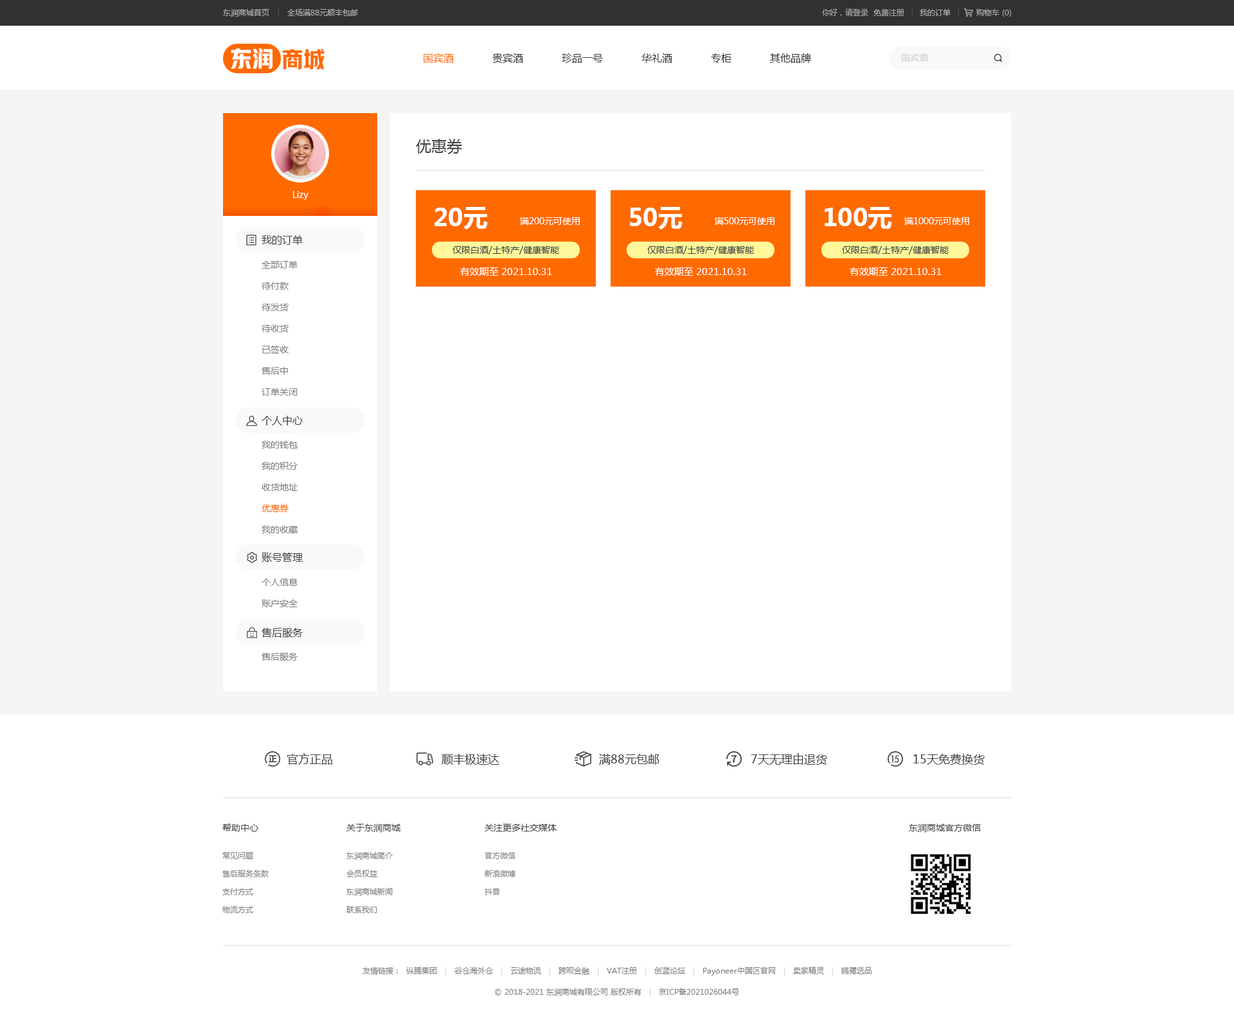
<style>
.page{position:relative;width:1234px;height:1023px;background:#ffffff}
.page>*{position:absolute;margin:0}
.t1{font:7.7px "MicrosoftYaHei";color:#b0b0b0}
.t2{font:7.7px "MicrosoftYaHei";color:#acacac}
.t3{font:21.9px "HYYakuHei-HEW";color:#ffffff}
.t4{font:21.9px "HYYakuHei-HEW";color:#ff6a00}
.t5{font:10.3px "MicrosoftYaHei";color:#333333}
.t6{font:10.3px "MicrosoftYaHei";color:#ff6a00}
.t7{font:9px "MicrosoftYaHei";color:#d2d2d2}
.t8{font:15.4px "MicrosoftYaHei";color:#434343}
.t9{font:9px "MicrosoftYaHei";color:#ffffff}
.t10{font:24.4px "MicrosoftYaHei-Bold";color:#ffffff}
.t11{font:10.3px "MicrosoftYaHei";color:#434343}
.t12{font:9px "MicrosoftYaHei";color:#434343}
.t13{font:9px/21.2px "MicrosoftYaHei";color:#7d7d7d}
.t14{font:9.6px "MicrosoftYaHei";color:#ffffff}
.t15{font:9px/21.2px "MicrosoftYaHei";color:#ff6a00}
.t16{font:9px "MicrosoftYaHei";color:#7d7d7d}
.t17{font:11.6px "MicrosoftYaHei";color:#434343}
.t18{font:7.7px/18px "MicrosoftYaHei";color:#7d7d7d}
.t19{font:7.7px "MicrosoftYaHei";color:#7d7d7d}
.t20{font:7.7px "MicrosoftYaHei";color:#d2d2d2}
</style>
<div class="page">
<p class="t1" style="left:223px;top:9px;width:135px;height:8px">东润商城首页       全场满88元顺丰包邮</p>
<p class="t2" style="left:822px;top:8px;width:190px;height:9px">你好，请登录  免费注册      我的订单          购物车 (0)</p>
<p class="t3" style="left:231px;top:48px;width:42px;height:21px">东润</p>
<p class="t4" style="left:282px;top:49px;width:43px;height:20px">商城</p>
<p class="t5" style="left:424px;top:53px;width:387px;height:10px"><span class="t6">国宾酒</span>            贵宾酒            珍品一号            华礼酒            专柜            其他品牌</p>
<p class="t7" style="left:902px;top:54px;width:26px;height:8px">国宾酒</p>
<p class="t8" style="left:416px;top:139px;width:46px;height:15px">优惠券</p>
<p class="t9" style="left:293px;top:191px;width:16px;height:9px">Lizy</p>
<p class="t10" style="left:435px;top:207px;width:53px;height:23px">20元</p>
<p class="t10" style="left:630px;top:207px;width:53px;height:23px">50元</p>
<p class="t10" style="left:825px;top:207px;width:67px;height:23px">100元</p>
<p class="t9" style="left:520px;top:217px;width:60px;height:8px">满200元可使用</p>
<p class="t9" style="left:715px;top:217px;width:60px;height:8px">满500元可使用</p>
<p class="t9" style="left:905px;top:217px;width:64px;height:8px">满1000元可使用</p>
<p class="t11" style="left:262px;top:235px;width:41px;height:10px">我的订单</p>
<p class="t12" style="left:453px;top:246px;width:106px;height:9px">仅限白酒/土特产/健康智能</p>
<p class="t12" style="left:647px;top:246px;width:107px;height:9px">仅限白酒/土特产/健康智能</p>
<p class="t12" style="left:842px;top:246px;width:107px;height:9px">仅限白酒/土特产/健康智能</p>
<p class="t13" style="left:262px;top:261px;width:36px;height:135px">全部订单<br>待付款<br>待发货<br>待收货<br>已签收<br>售后中<br>订单关闭</p>
<p class="t14" style="left:460px;top:267px;width:92px;height:9px">有效期至 2021.10.31</p>
<p class="t14" style="left:655px;top:267px;width:92px;height:9px">有效期至 2021.10.31</p>
<p class="t14" style="left:850px;top:267px;width:92px;height:9px">有效期至 2021.10.31</p>
<p class="t11" style="left:262px;top:416px;width:41px;height:10px">个人中心</p>
<p class="t13" style="left:262px;top:441px;width:36px;height:93px">我的钱包<br>我的积分<br>收货地址<br><span class="t15">优惠券<br></span>我的收藏</p>
<p class="t11" style="left:262px;top:552px;width:41px;height:10px">账号管理</p>
<p class="t13" style="left:262px;top:579px;width:36px;height:29px">个人信息<br>账户安全</p>
<p class="t11" style="left:262px;top:628px;width:41px;height:10px">售后服务</p>
<p class="t16" style="left:262px;top:653px;width:36px;height:8px">售后服务</p>
<p class="t17" style="left:287px;top:753px;width:45px;height:12px">官方正品</p>
<p class="t17" style="left:442px;top:754px;width:58px;height:11px">顺丰极速达</p>
<p class="t17" style="left:599px;top:754px;width:61px;height:11px">满88元包邮</p>
<p class="t17" style="left:751px;top:753px;width:76px;height:12px">7天无理由退货</p>
<p class="t17" style="left:914px;top:754px;width:71px;height:11px">15天免费换货</p>
<p class="t12" style="left:222px;top:824px;width:36px;height:8px">帮助中心</p>
<p class="t12" style="left:346px;top:824px;width:55px;height:9px">关于东润商城</p>
<p class="t12" style="left:485px;top:824px;width:72px;height:8px">关注更多社交媒体</p>
<p class="t12" style="left:909px;top:824px;width:72px;height:9px">东润商城官方微信</p>
<p class="t18" style="left:222px;top:852px;width:47px;height:62px">常见问题<br>售后服务条款<br>支付方式<br>物流方式</p>
<p class="t18" style="left:346px;top:852px;width:47px;height:62px">东润商城简介<br>会员权益<br>东润商城新闻<br>联系我们</p>
<p class="t18" style="left:485px;top:852px;width:31px;height:44px">官方微信<br>新浪微博<br>抖音</p>
<p class="t19" style="left:363px;top:967px;width:509px;height:9px">友情链接：  纵腾集团   <span class="t20">|   </span>谷仓海外仓   <span class="t20">|   </span>云途物流   <span class="t20">|   </span>跨呗金融   <span class="t20">|   </span>VAT注册   <span class="t20">|   </span>创蓝论坛   <span class="t20">|   </span>Payoneer中国区官网   <span class="t20">|   </span>卖家精灵   <span class="t20">|   </span>鸥鹭选品</p>
<p class="t19" style="left:495px;top:989px;width:244px;height:8px">© 2018-2021 东润商城有限公司 版权所有   <span class="t20">|   </span>京ICP备2021026044号</p>
</div>
